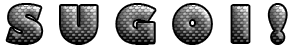
<style>
.page{position:relative;width:304px;height:49px;background:#ffffff}
.page>*{position:absolute;margin:0}
.t1{font:48px "GillSans-UltraBold"}
</style>
<div class="page">
<p class="t1" style="left:7px;top:5px;width:279px;height:38px">S U G O I !</p>
</div>
